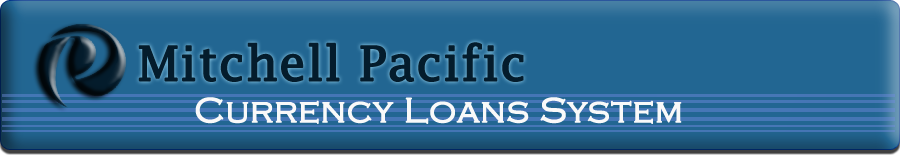
<style>
.page{position:relative;width:900px;height:160px;background:#226692}
.page>*{position:absolute;margin:0}
.t1{font:48px "LucidaFax";color:#041c2c;font-weight:bold}
.t2{font:36px "CopperplateGothic-Light";color:#f9f9f9;font-weight:bold}
</style>
<div class="page">
<p class="t1" style="left:138px;top:42px;width:386px;height:40px">Mitchell Pacific</p>
<p class="t2" style="left:195px;top:97px;width:487px;height:27px">Currency Loans System</p>
</div>
